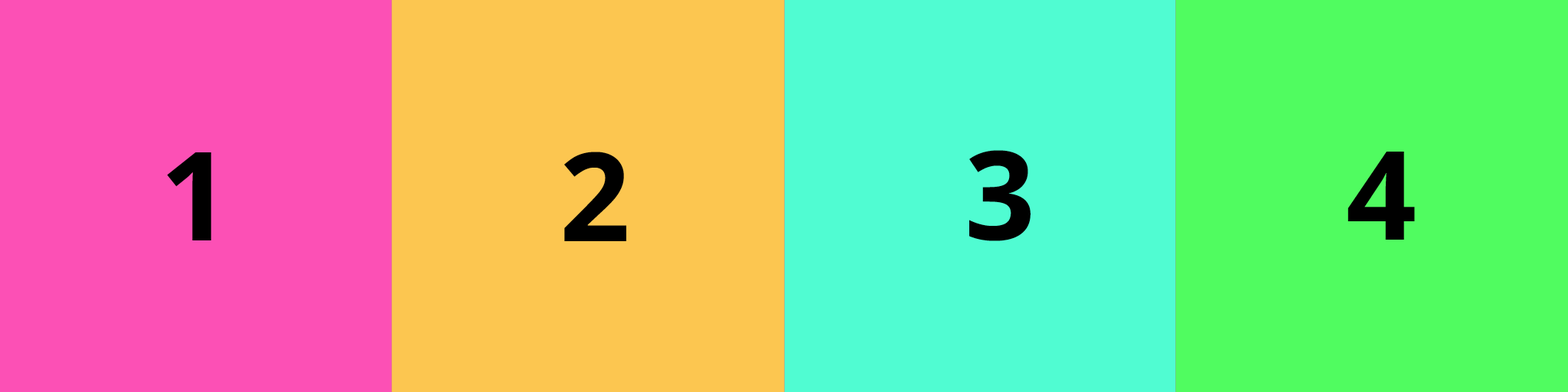
<style>
.page{position:relative;width:1568px;height:392px;background:#fc50b5}
.page>*{position:absolute;margin:0}
.t1{font:123.3px "OpenSans-Bold";color:#000000}
</style>
<div class="page">
<p class="t1" style="left:167px;top:152px;width:44px;height:88px">1</p>
<p class="t1" style="left:564px;top:152px;width:62px;height:89px">2</p>
<p class="t1" style="left:969px;top:150px;width:62px;height:91px">3</p>
<p class="t1" style="left:1348px;top:152px;width:67px;height:88px">4</p>
</div>
